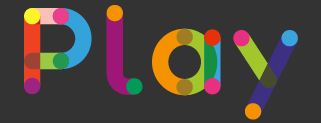
<style>
.page{position:relative;width:321px;height:123px;background:#333333}
.page>*{position:absolute;margin:0}
.t1{font:79.2px "ColorTubeRegular"}
</style>
<div class="page">
<p class="t1" style="left:24px;top:5px;width:274px;height:115px">Play</p>
</div>
